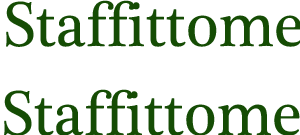
<style>
.page{position:relative;width:300px;height:135px;background:#ffffff}
.page>*{position:absolute;margin:0}
.t1{font:64.9px "PlantagenetCherokee";color:#154c04;scale:0.94 1}
</style>
<div class="page">
<p class="t1" style="left:6px;top:0px;width:296px;height:47px">Staffittome</p>
<p class="t1" style="left:4px;top:89px;width:296px;height:47px">Staffittome</p>
</div>
